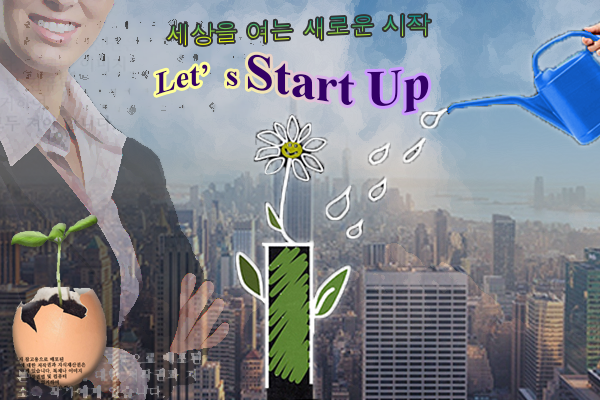
<style>
.page{position:relative;width:600px;height:400px}
.page>*{position:absolute;margin:0}
.t1{font:24px "Dotum"}
.t2{font:49.8px "TimesNewRomanPS-BoldMT";color:#330066}
.t3{font:31.1px "TimesNewRomanPS-BoldMT";color:#330066}
</style>
<div class="page">
<p class="t1" style="left:167px;top:14px;width:264px;height:32px">세상을 여는 새로운 시작</p>
<p class="t2" style="left:156px;top:54px;width:273px;height:59px"><span class="t3">Let’s </span>Start Up</p>
</div>
